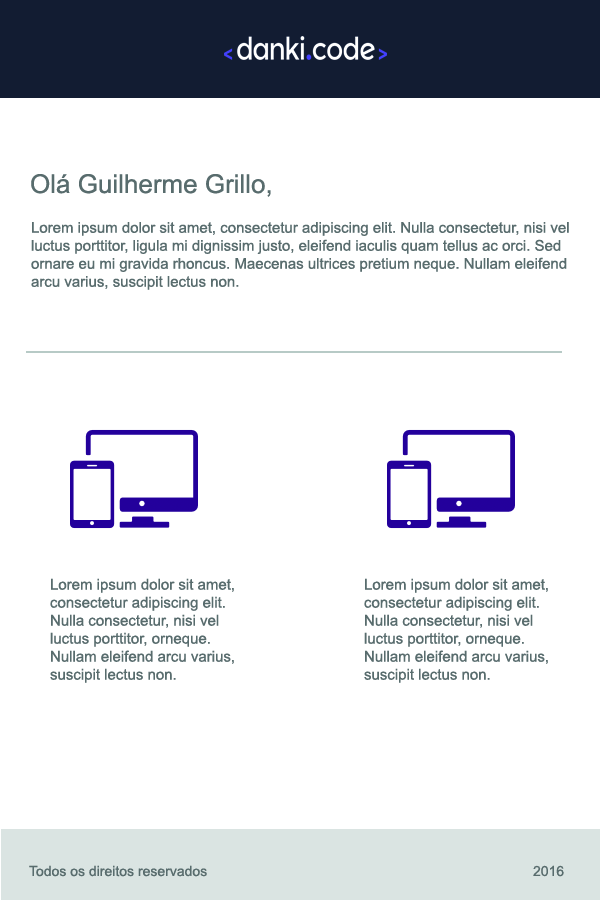
<style>
.page{position:relative;width:600px;height:900px;background:#ffffff}
.page>*{position:absolute;margin:0}
.t1{font:26px "ArialMT";color:#586c6d}
.t2{font:15px/18px "ArialMT";color:#586c6d}
.t3{font:14px "ArialMT";color:#586c6d}
</style>
<div class="page">
<p class="t1" style="left:31px;top:174px;width:240px;height:23px">Olá Guilherme Grillo,</p>
<p class="t2" style="left:31px;top:222px;width:538px;height:68px">Lorem ipsum dolor sit amet, consectetur adipiscing elit. Nulla consectetur, nisi vel luctus porttitor, ligula mi dignissim justo, eleifend iaculis quam tellus ac orci. Sed ornare eu mi gravida rhoncus. Maecenas ultrices pretium neque. Nullam eleifend arcu varius, suscipit lectus non.</p>
<p class="t2" style="left:50px;top:578px;width:184px;height:105px">Lorem ipsum dolor sit amet, consectetur adipiscing elit. Nulla consectetur, nisi vel luctus porttitor, orneque. Nullam eleifend arcu varius, suscipit lectus non.</p>
<p class="t2" style="left:364px;top:578px;width:184px;height:105px">Lorem ipsum dolor sit amet, consectetur adipiscing elit. Nulla consectetur, nisi vel luctus porttitor, orneque. Nullam eleifend arcu varius, suscipit lectus non.</p>
<p class="t3" style="left:29px;top:865px;width:535px;height:12px">Todos os direitos reservados          2016</p>
</div>
